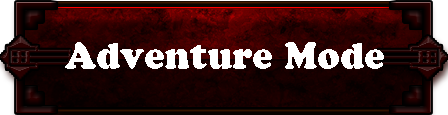
<style>
.page{position:relative;width:448px;height:115px}
.page>*{position:absolute;margin:0}
.t1{font:36px "CooperBlackStd";color:#ffffff}
</style>
<div class="page">
<p class="t1" style="left:65px;top:42px;width:319px;height:27px">Adventure Mode</p>
</div>
